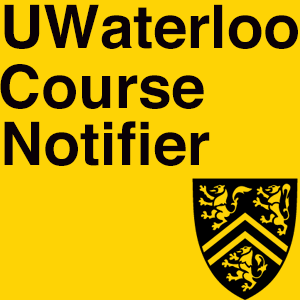
<style>
.page{position:relative;width:300px;height:300px;background:#fed305}
.page>*{position:absolute;margin:0}
.t1{font:60px "Helvetica-Bold";color:#090006}
</style>
<div class="page">
<p class="t1" style="left:4px;top:4px;width:294px;height:45px">UWaterloo</p>
<p class="t1" style="left:0px;top:64px;width:204px;height:45px">Course</p>
<p class="t1" style="left:4px;top:121px;width:206px;height:45px">Notifier</p>
</div>
